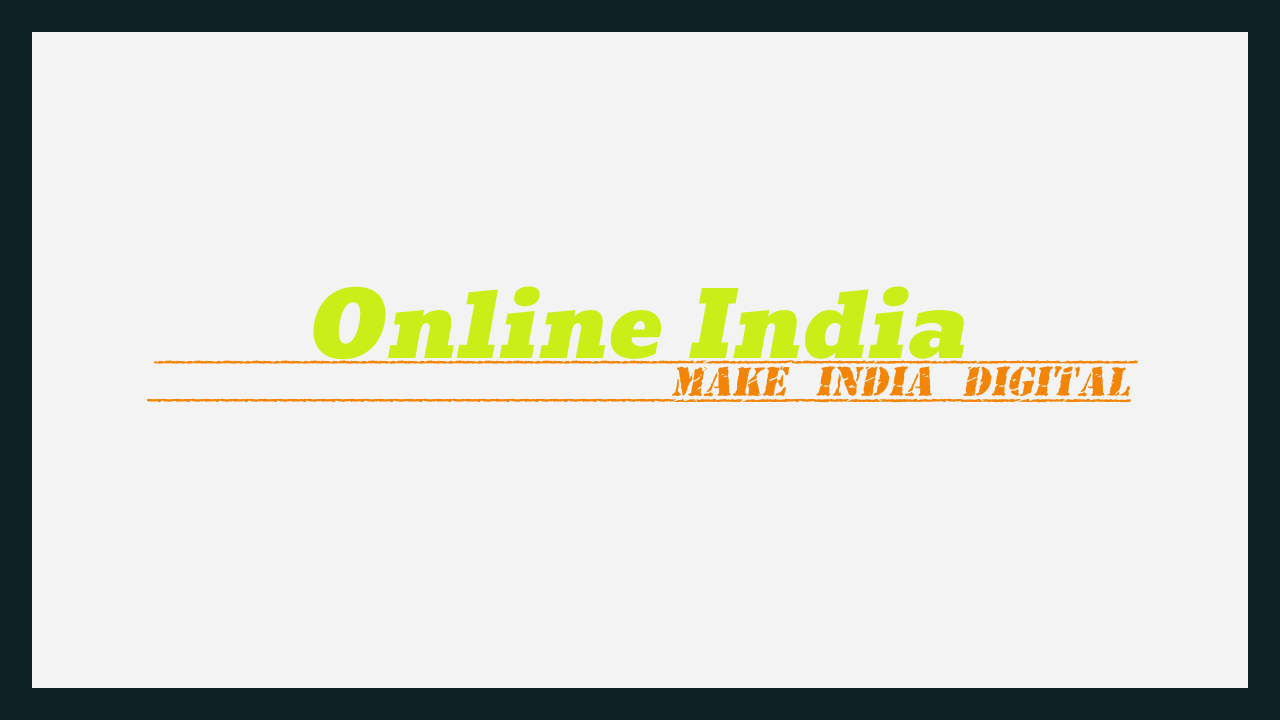
<style>
.page{position:relative;width:1280px;height:720px;background:#f3f3f3}
.page>*{position:absolute;margin:0}
.t1{font:90px "Moul-Regular";color:#caef18;font-style:italic}
.t2{font:42px "OldStamper";color:#f28407;font-style:italic}
</style>
<div class="page">
<p class="t1" style="left:312px;top:286px;width:655px;height:74px">Online India</p>
<p class="t2" style="left:146px;top:360px;width:992px;height:43px">Make India Digital</p>
</div>
